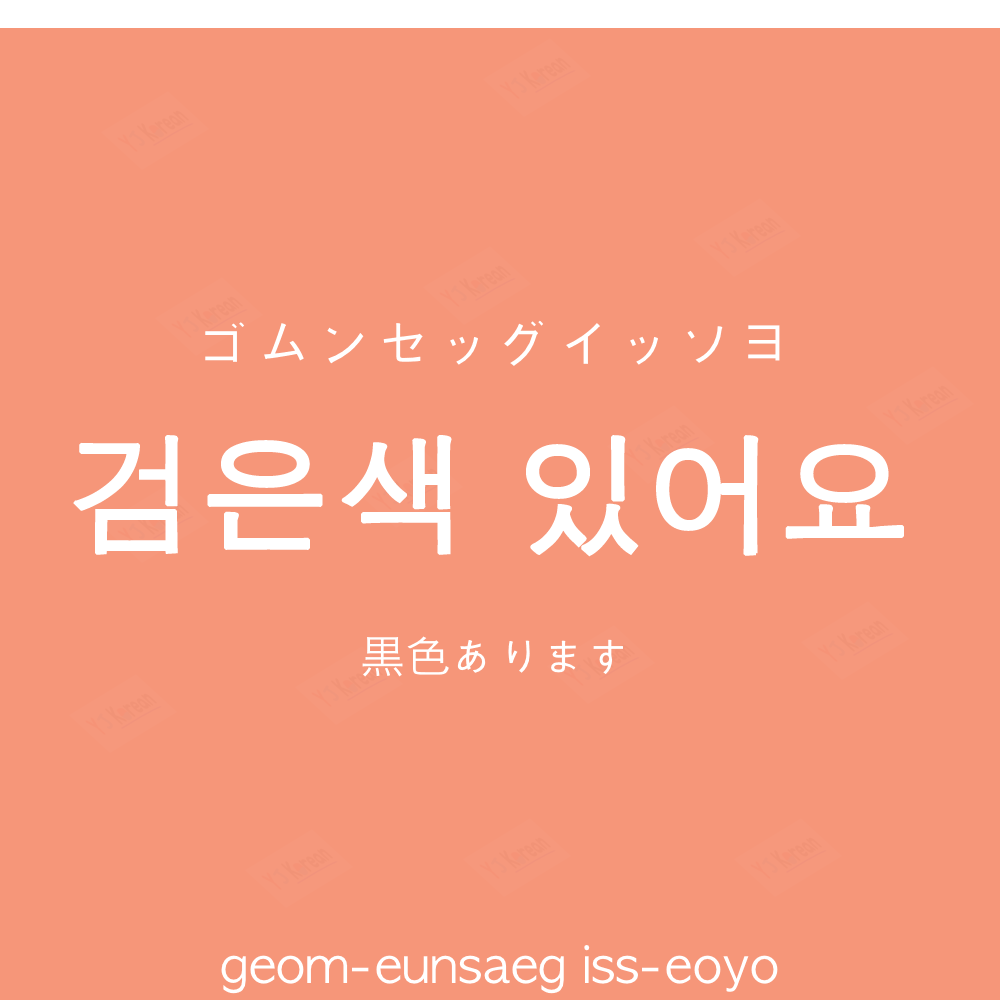
<style>
.page{position:relative;width:1000px;height:1000px;background:#f69679}
.page>*{position:absolute;margin:0}
.t1{font:60px "AppleGothic";color:#ffffff}
.t2{font:130px "AppleGothic";color:#ffffff;font-weight:bold}
.t3{font:45px "AppleGothic";color:#ffffff}
.t4{font:45px "HiraKakuProN-W3";color:#ffffff}
.t5{font:50px "AppleGothic";color:#ffffff}
</style>
<div class="page">
<p class="t1" style="left:205px;top:320px;width:575px;height:46px">ゴムンセッグイッソヨ</p>
<p class="t2" style="left:73px;top:435px;width:831px;height:122px">검은색 있어요</p>
<p class="t3" style="left:362px;top:636px;width:261px;height:41px"><span class="t4">黒</span>色あります</p>
<p class="t5" style="left:221px;top:945px;width:557px;height:49px">geom-eunsaeg iss-eoyo</p>
</div>
